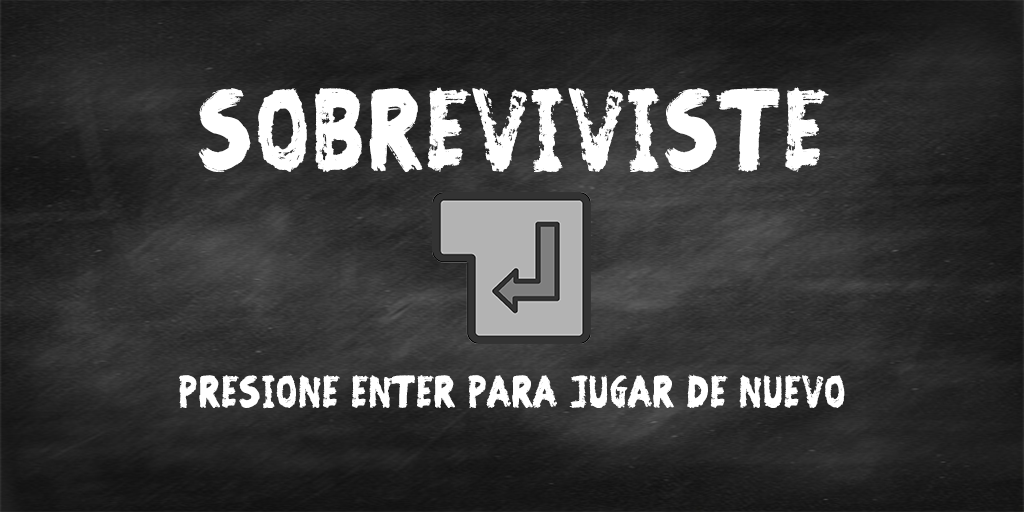
<style>
.page{position:relative;width:1024px;height:512px}
.page>*{position:absolute;margin:0}
.t1{font:100px "BewareoftheZombies";letter-spacing:0.05em;color:#ffffff}
.t2{font:38.9px "BewareoftheZombies";letter-spacing:0.05em;color:#ffffff}
</style>
<div class="page">
<p class="t1" style="left:198px;top:87px;width:631px;height:85px">Sobreviviste</p>
<p class="t2" style="left:179px;top:374px;width:666px;height:35px">Presione enter para Jugar de nuevo</p>
</div>
